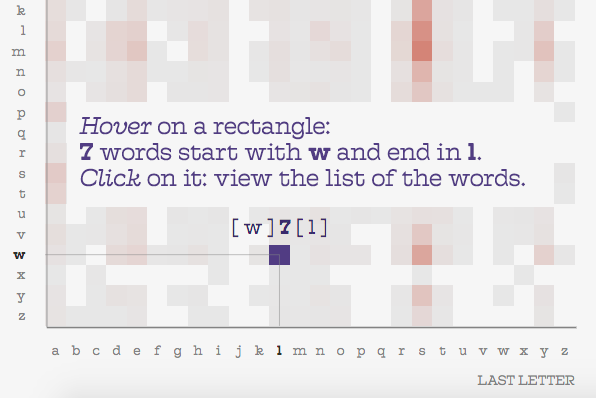
<style>
.page{position:relative;width:596px;height:398px;background:#f6f6f6}
.page>*{position:absolute;margin:0}
.t1{font:24px/26px "Hatch-Light";color:#513c83}
.t2{font:24px/26px "Hatch-LightItalic";color:#513c83}
.t3{font:24px/26px "Hatch-Medium";color:#513c83}
</style>
<div class="page">
<p class="t1" style="left:79px;top:117px;width:446px;height:70px"><span class="t2">Hover </span>on a rectangle:<br><span class="t3">7 </span>words start with <span class="t3">w </span>and end in <span class="t3">l</span>.<br><span class="t2">Click </span>on it: view the list of the words.</p>
</div>
